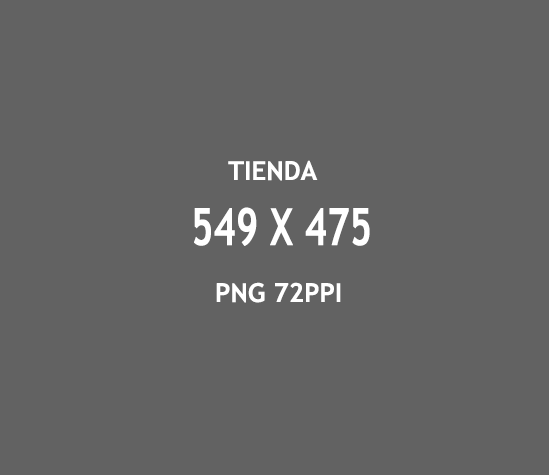
<style>
.page{position:relative;width:549px;height:475px;background:#626262}
.page>*{position:absolute;margin:0}
.t1{font:26.2px "TrebuchetMS-Bold";color:#ffffff}
.t2{font:51.5px "TrebuchetMS-Bold";color:#ffffff;scale:0.75 1}
</style>
<div class="page">
<p class="t1" style="left:228px;top:160px;width:90px;height:21px">TIENDA</p>
<p class="t2" style="left:194px;top:207px;width:176px;height:39px">549 X 475</p>
<p class="t1" style="left:216px;top:282px;width:125px;height:21px">PNG 72PPI</p>
</div>
